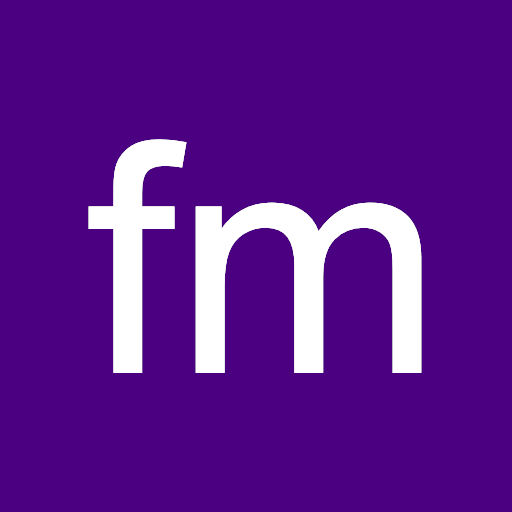
<style>
.page{position:relative;width:512px;height:512px;background:#4b0082}
.page>*{position:absolute;margin:0}
.t1{font:320px "ArialMT";color:#ffffff}
</style>
<div class="page">
<p class="t1" style="left:88px;top:139px;width:334px;height:234px">fm</p>
</div>
